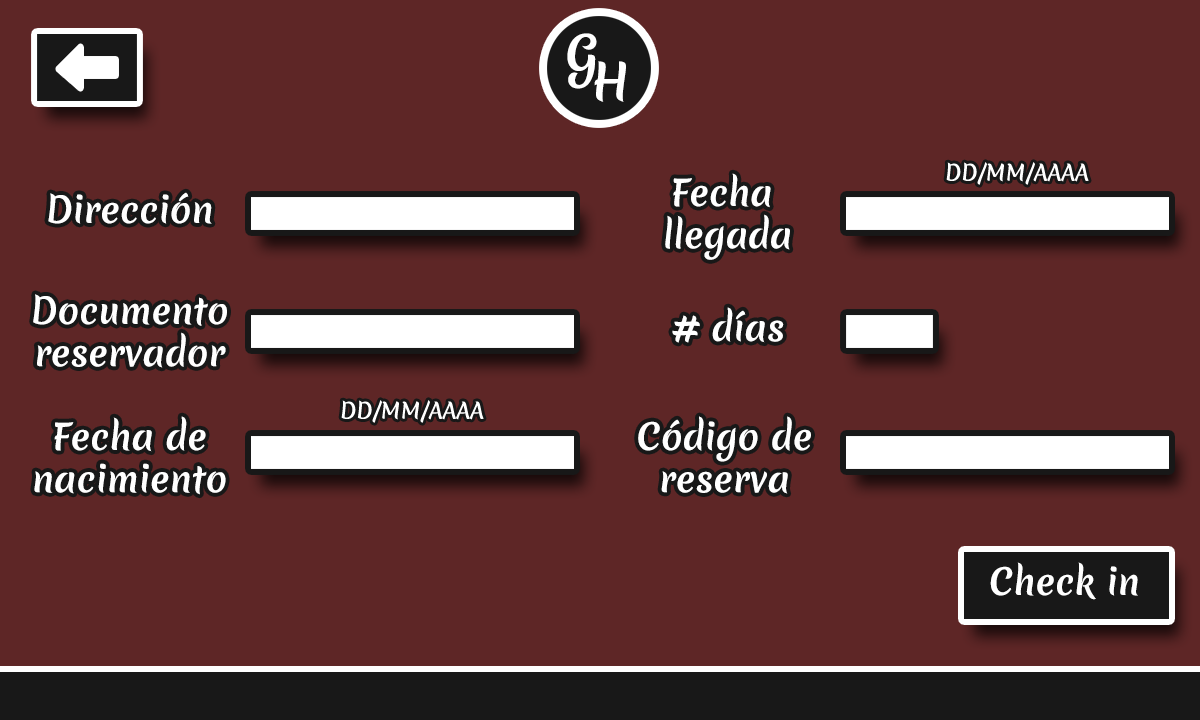
<style>
.page{position:relative;width:1200px;height:720px;background:#5e2626}
.page>*{position:absolute;margin:0}
.t1{font:48.4px "MeriendaOne-Regular";color:#ffffff}
.t2{font:35.1px/42.3px "MeriendaOne-Regular";color:#ffffff}
.t3{font:35.1px "MeriendaOne-Regular";color:#ffffff}
</style>
<div class="page">
<p class="t1" style="left:567px;top:33px;width:30px;height:56px">G</p>
<p class="t1" style="left:594px;top:61px;width:32px;height:41px">H</p>
<p class="t2" style="left:665px;top:173px;width:125px;height:87px;text-align:center">Fecha <br>llegada</p>
<p class="t3" style="left:48px;top:192px;width:164px;height:32px">Dirección</p>
<p class="t2" style="left:33px;top:294px;width:194px;height:74px;text-align:center">Documento<br>reservador</p>
<p class="t3" style="left:672px;top:307px;width:112px;height:36px"># días</p>
<p class="t2" style="left:34px;top:416px;width:192px;height:79px;text-align:center">Fecha de<br>nacimiento</p>
<p class="t2" style="left:638px;top:416px;width:173px;height:78px;text-align:center">Código de<br>reserva</p>
<p class="t3" style="left:990px;top:562px;width:148px;height:38px">Check in</p>
</div>
